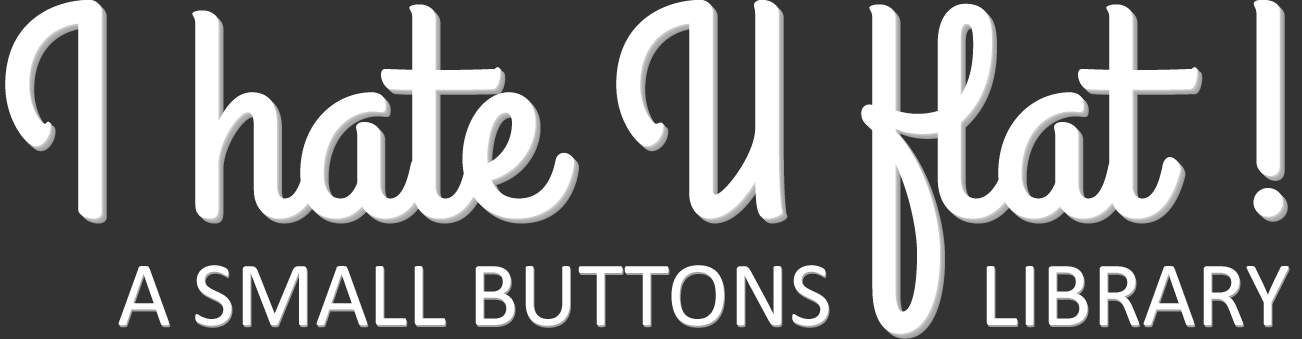
<style>
.page{position:relative;width:1302px;height:339px;background:#333333}
.page>*{position:absolute;margin:0}
.t1{font:300px "GrandHotel-Regular";color:#ffffff}
.t2{font:93px "Calibri";color:#ffffff}
</style>
<div class="page">
<p class="t1" style="left:5px;top:0px;width:1278px;height:334px">I hate U flat !</p>
<p class="t1" style="left:6px;top:1px;width:1278px;height:334px">I hate U flat !</p>
<p class="t1" style="left:7px;top:2px;width:1278px;height:334px">I hate U flat !</p>
<p class="t1" style="left:9px;top:4px;width:1278px;height:334px">I hate U flat !</p>
<p class="t1" style="left:10px;top:5px;width:1278px;height:334px">I hate U flat !</p>
<p class="t2" style="left:118px;top:265px;width:1171px;height:61px">A SMALL BUTTONS       LIBRARY</p>
</div>
